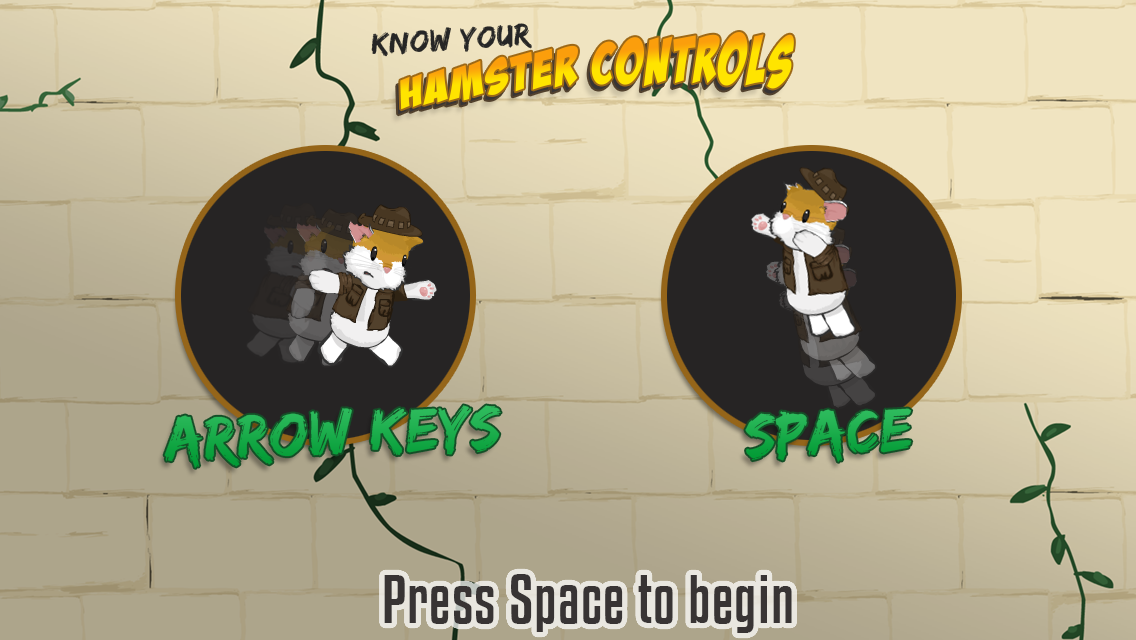
<style>
.page{position:relative;width:1136px;height:640px}
.page>*{position:absolute;margin:0}
.t1{font:31.9px "EdoSZ";letter-spacing:0.02em;color:#262626}
.t2{font:56.3px "BadaBoomBB";letter-spacing:0.06em;scale:0.91 1}
.t3{font:63.4px "EdoSZ";letter-spacing:0.02em;color:#1aac4b}
.t4{font:63.4px "EdoSZ";letter-spacing:0.02em;color:#1cae4c}
.t5{font:60.9px "KenyanCoffeeRg-Regular";letter-spacing:0.02em;color:#383434}
</style>
<div class="page">
<p class="t1" style="left:371px;top:23px;width:161px;height:34px;rotate:-4deg">Know your</p>
<p class="t2" style="left:397px;top:37px;width:394px;height:78px;rotate:-5deg">hamster controls</p>
<p class="t2" style="left:400px;top:32px;width:394px;height:78px;rotate:-5deg">hamster controls</p>
<p class="t3" style="left:164px;top:405px;width:337px;height:63px;rotate:-2deg">Arrow Keys</p>
<p class="t4" style="left:745px;top:408px;width:167px;height:54px;rotate:-2deg">Space</p>
<p class="t5" style="left:384px;top:574px;width:408px;height:59px">Press Space to begin</p>
</div>
